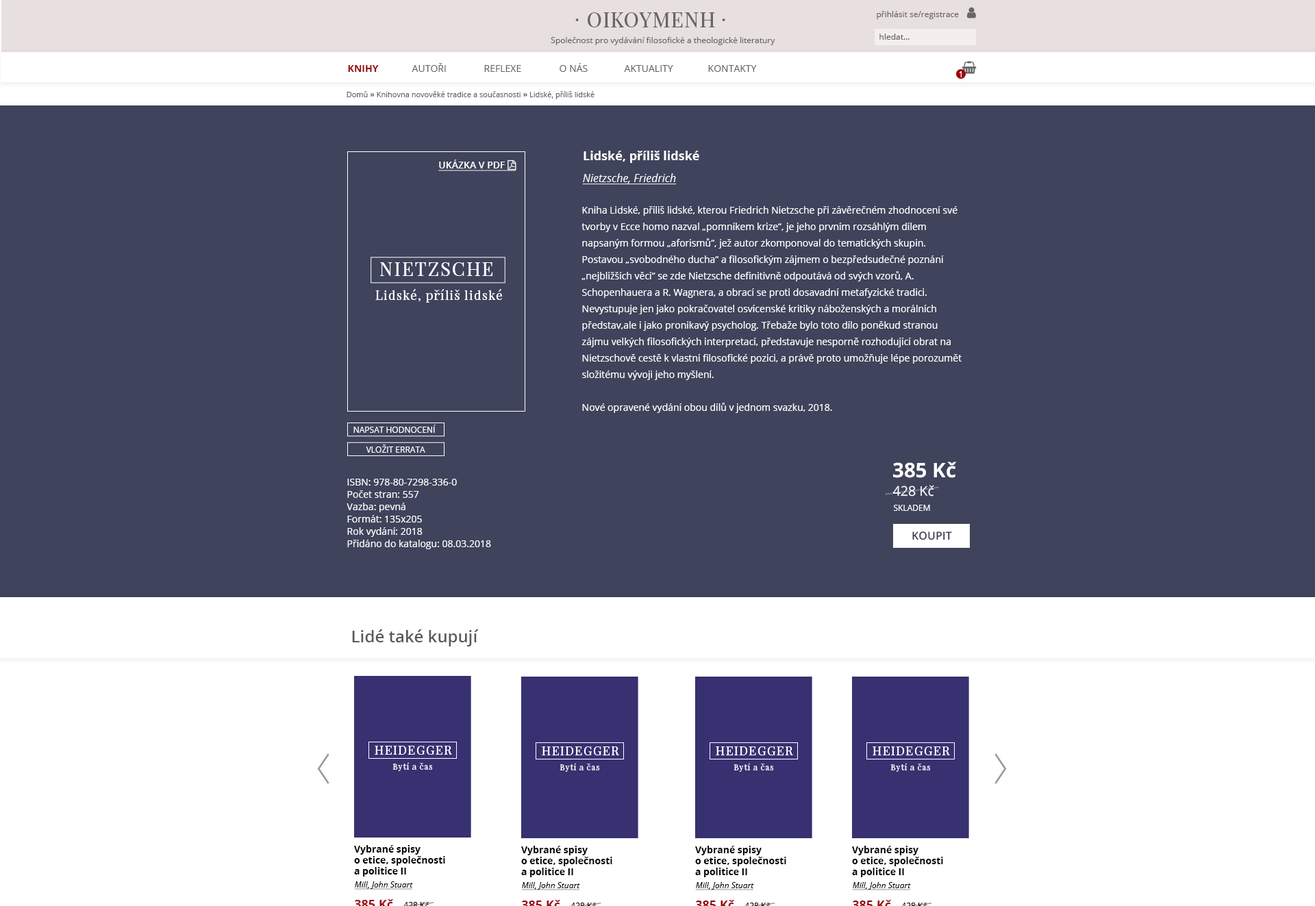
<style>
.page{position:relative;width:1315px;height:906px;background:#3f435b}
.page>*{position:absolute;margin:0}
.t1{font:20.6px "PlayfairDisplay-Regular";letter-spacing:0.04em;color:#666666}
.t2{font:8.2px "OpenSans";color:#666666}
.t3{font:20.6px "PlayfairDisplaySC-Regular";letter-spacing:0.04em;color:#666666}
.t4{font:9.6px "OpenSans-Bold";color:#9a080d;text-transform:uppercase}
.t5{font:9.6px "OpenSans";color:#666666;text-transform:uppercase}
.t6{font:8.2px "OpenSans";color:#ffffff}
.t7{font:7.5px "OpenSans";color:#616161}
.t8{font:7.5px "OpenSans-Bold";color:#616161}
.t9{font:12.3px "OpenSans-Bold";color:#ffffff}
.t10{font:11px "OpenSans-Italic";color:#ffffff;text-decoration:underline}
.t11{font:9.6px/16.4px "OpenSans";color:#ffffff}
.t12{font:18.8px "PlayfairDisplay-Regular";letter-spacing:0.075em;color:#ffffff;text-transform:uppercase}
.t13{font:12.5px "PlayfairDisplay-Regular";letter-spacing:0.075em;color:#ffffff}
.t14{font:8.2px "OpenSans";color:#ffffff;text-transform:uppercase}
.t15{font:20.3px "OpenSans-Bold";color:#ffffff}
.t16{font:9.6px/12.3px "OpenSans";color:#ffffff}
.t17{font:13.5px "OpenSans";color:#ffffff}
.t18{font:11.1px "OpenSans-Semibold";color:#3f435b;text-transform:uppercase}
.t19{font:16.4px "OpenSans-Semibold";color:#595959}
.t20{font:12.3px "PlayfairDisplay-Regular";letter-spacing:0.075em;color:#ffffff;text-transform:uppercase}
.t21{font:8.2px "PlayfairDisplay-Regular";letter-spacing:0.075em;color:#ffffff}
.t22{font:9.6px/11px "OpenSans-Bold";color:#000000}
.t23{font:8.2px "OpenSans-Italic";color:#000000;text-decoration:underline}
</style>
<div class="page">
<p class="t1" style="left:588px;top:12px;width:127px;height:15px">OIKOYMENH</p>
<p class="t2" style="left:877px;top:11px;width:82px;height:8px">přihlásit se/registrace</p>
<p class="t3" style="left:576px;top:18px;width:3px;height:3px">·</p>
<p class="t3" style="left:722px;top:18px;width:4px;height:3px">·</p>
<p class="t2" style="left:551px;top:37px;width:225px;height:8px">Společnost pro vydávání filosofické a theologické literatury</p>
<p class="t2" style="left:880px;top:34px;width:30px;height:6px">hledat...</p>
<p class="t4" style="left:348px;top:65px;width:31px;height:7px">Knihy</p>
<p class="t5" style="left:412px;top:63px;width:34px;height:9px">autoři</p>
<p class="t5" style="left:484px;top:65px;width:37px;height:7px">reflexe</p>
<p class="t5" style="left:560px;top:63px;width:28px;height:9px">o nás</p>
<p class="t5" style="left:624px;top:65px;width:50px;height:7px">Aktuality</p>
<p class="t5" style="left:708px;top:65px;width:49px;height:7px">kontakty</p>
<p class="t6" style="left:959px;top:71px;width:3px;height:6px">1</p>
<p class="t7" style="left:347px;top:91px;width:248px;height:8px">Domů <span class="t8">»</span> Knihovna novověké tradice a současnosti <span class="t8">»</span> Lidské, příliš lidské</p>
<p class="t9" style="left:584px;top:151px;width:116px;height:12px">Lidské, příliš lidské</p>
<p class="t10" style="left:582px;top:173px;width:95px;height:12px">Nietzsche, Friedrich</p>
<p class="t11" style="left:582px;top:206px;width:380px;height:207px">Kniha Lidské, příliš lidské, kterou Friedrich Nietzsche při závěrečném zhodnocení své tvorby v Ecce homo nazval „pomníkem krize“, je jeho prvním rozsáhlým dílem napsaným formou „aforismů“, jež autor zkomponoval do tematických skupin. Postavou „svobodného ducha“ a filosofickým zájmem o bezpředsudečné poznání „nejbližších věcí“ se zde Nietzsche definitivně odpoutává od svých vzorů, A. Schopenhauera a R. Wagnera, a obrací se proti dosavadní metafyzické tradici. Nevystupuje jen jako pokračovatel osvícenské kritiky náboženských a morálních představ,ale i jako pronikavý psycholog. Třebaže bylo toto dílo poněkud stranou zájmu velkých filosofických interpretací, představuje nesporně rozhodující obrat na Nietzschově cestě k vlastní filosofické pozici, a právě proto umožňuje lépe porozumět složitému vývoji jeho myšlení.<br> <br>Nové opravené vydání obou dílů v jednom svazku, 2018.</p>
<p class="t12" style="left:380px;top:262px;width:113px;height:14px">Nietzsche</p>
<p class="t13" style="left:375px;top:289px;width:127px;height:14px">Lidské, příliš lidské</p>
<p class="t14" style="left:354px;top:425px;width:82px;height:8px">Napsat hodnocení</p>
<p class="t14" style="left:366px;top:445px;width:59px;height:8px">Vložit errata</p>
<p class="t15" style="left:893px;top:462px;width:64px;height:16px">385 Kč</p>
<p class="t16" style="left:347px;top:479px;width:144px;height:70px">ISBN: 978-80-7298-336-0<br>Počet stran: 557<br>Vazba: pevná<br>Formát: 135x205<br>Rok vydání: 2018<br>Přidáno do katalogu: 08.03.2018</p>
<p class="t17" style="left:893px;top:485px;width:42px;height:12px">428 Kč</p>
<p class="t14" style="left:894px;top:505px;width:36px;height:6px">skladem</p>
<p class="t18" style="left:913px;top:532px;width:39px;height:9px">koupit</p>
<p class="t19" style="left:352px;top:630px;width:127px;height:17px">Lidé také kupují</p>
<p class="t20" style="left:375px;top:746px;width:77px;height:9px">Heidegger</p>
<p class="t20" style="left:542px;top:747px;width:77px;height:9px">Heidegger</p>
<p class="t20" style="left:716px;top:747px;width:77px;height:9px">Heidegger</p>
<p class="t20" style="left:873px;top:747px;width:77px;height:9px">Heidegger</p>
<p class="t21" style="left:393px;top:763px;width:40px;height:8px">Bytí a čas</p>
<p class="t21" style="left:560px;top:763px;width:40px;height:9px">Bytí a čas</p>
<p class="t21" style="left:734px;top:763px;width:40px;height:9px">Bytí a čas</p>
<p class="t21" style="left:891px;top:763px;width:40px;height:9px">Bytí a čas</p>
<p class="t22" style="left:354px;top:845px;width:91px;height:32px">Vybrané spisy <br>o etice, společnosti <br>a politice II</p>
<p class="t22" style="left:521px;top:846px;width:92px;height:32px">Vybrané spisy <br>o etice, společnosti <br>a politice II</p>
<p class="t22" style="left:695px;top:846px;width:92px;height:32px">Vybrané spisy <br>o etice, společnosti <br>a politice II</p>
<p class="t22" style="left:852px;top:846px;width:91px;height:32px">Vybrané spisy <br>o etice, společnosti <br>a politice II</p>
<p class="t23" style="left:354px;top:882px;width:59px;height:8px">Mill, John Stuart</p>
<p class="t23" style="left:521px;top:882px;width:59px;height:9px">Mill, John Stuart</p>
<p class="t23" style="left:695px;top:882px;width:59px;height:9px">Mill, John Stuart</p>
<p class="t23" style="left:852px;top:882px;width:59px;height:9px">Mill, John Stuart</p>
</div>
